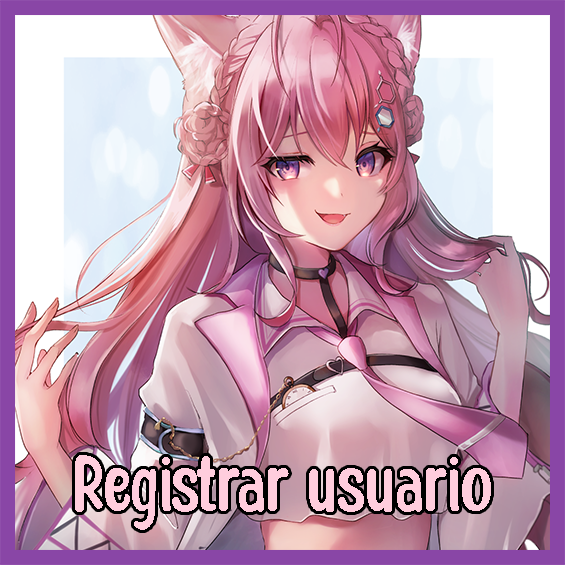
<style>
.page{position:relative;width:565px;height:565px}
.page>*{position:absolute;margin:0}
.t1{font:85.1px "HoneyNotes-Regular";color:#ffcddd}
</style>
<div class="page">
<p class="t1" style="left:75px;top:455px;width:416px;height:75px">Registrar usuario</p>
</div>
